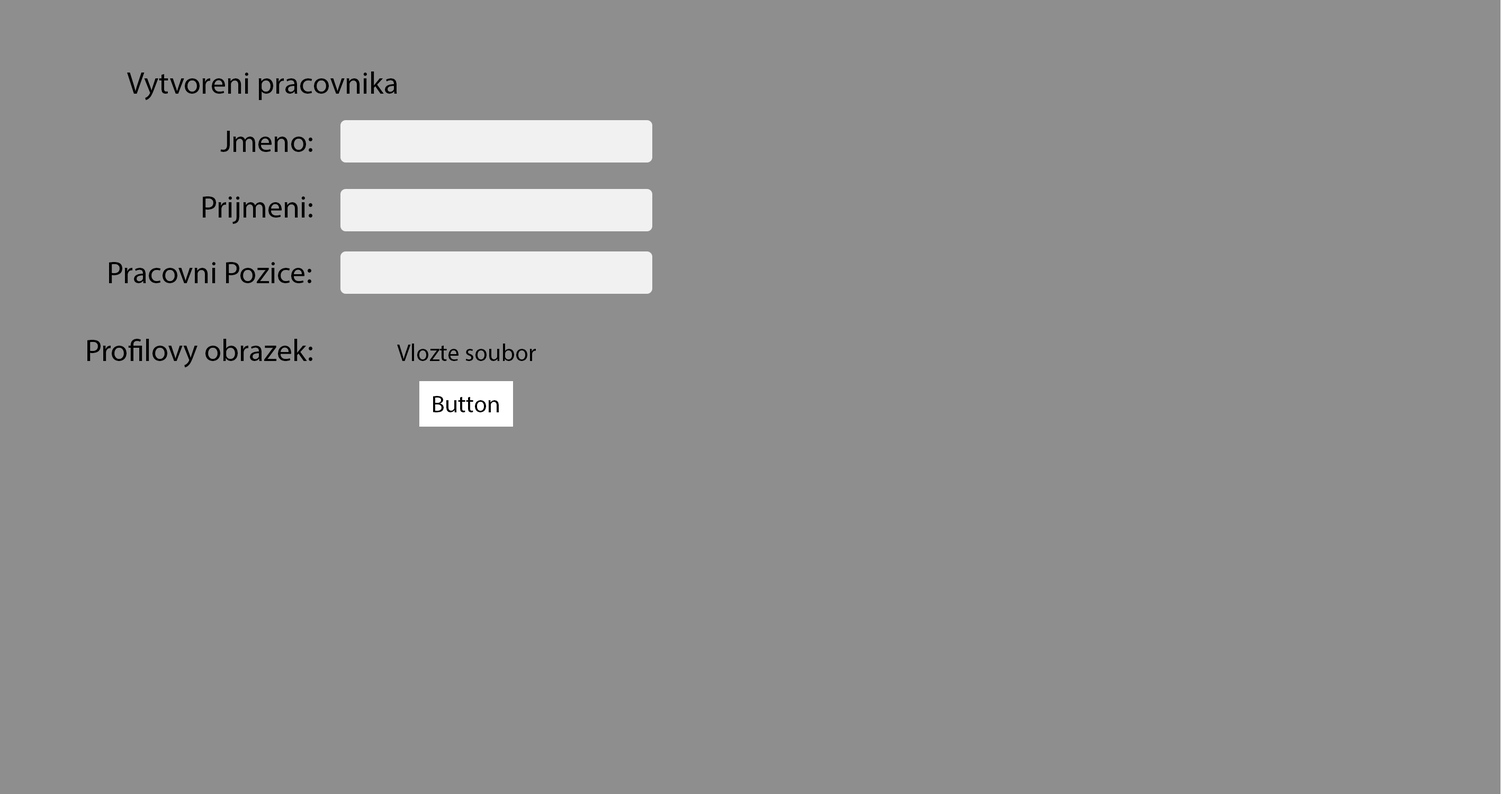
<style>
.page{position:relative;width:1501px;height:794px;background:#8e8e8e}
.page>*{position:absolute;margin:0}
.t1{font:30.9px "MyriadPro-Regular";color:#000000}
.t2{font:24.3px "MyriadPro-Regular";color:#000000}
</style>
<div class="page">
<p class="t1" style="left:127px;top:71px;width:270px;height:30px">Vytvoreni pracovnika</p>
<p class="t1" style="left:220px;top:131px;width:92px;height:21px">Jmeno:</p>
<p class="t1" style="left:203px;top:196px;width:109px;height:28px">Prijmeni:</p>
<p class="t1" style="left:109px;top:262px;width:202px;height:21px">Pracovni Pozice:</p>
<p class="t1" style="left:87px;top:339px;width:225px;height:29px">Profilovy obrazek:</p>
<p class="t2" style="left:397px;top:344px;width:139px;height:17px">Vlozte soubor</p>
<p class="t2" style="left:433px;top:396px;width:66px;height:17px">Button</p>
</div>
